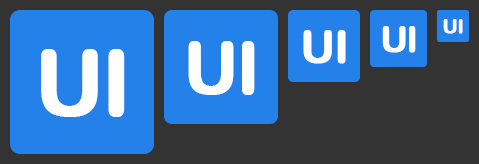
<style>
.page{position:relative;width:479px;height:164px;background:#2381e9}
.page>*{position:absolute;margin:0}
.t1{font:45px "ArialRoundedMTBold";letter-spacing:-0.04em;color:#ffffff;font-weight:bold}
.t2{font:35.6px "ArialRoundedMTBold";letter-spacing:-0.04em;color:#ffffff;font-weight:bold}
.t3{font:20px "ArialRoundedMTBold";letter-spacing:-0.04em;color:#ffffff;font-weight:bold}
.t4{font:71.2px "ArialRoundedMTBold";letter-spacing:-0.04em;color:#ffffff;font-weight:bold}
.t5{font:90px "ArialRoundedMTBold";letter-spacing:-0.04em;color:#ffffff;font-weight:bold}
</style>
<div class="page">
<p class="t1" style="left:303px;top:30px;width:43px;height:34px">UI</p>
<p class="t2" style="left:382px;top:26px;width:34px;height:27px">UI</p>
<p class="t3" style="left:443px;top:19px;width:20px;height:15px">UI</p>
<p class="t4" style="left:188px;top:41px;width:67px;height:54px">UI</p>
<p class="t5" style="left:41px;top:49px;width:84px;height:68px">UI</p>
</div>
